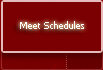
<style>
.page{position:relative;width:103px;height:70px;background:#7a0001}
.page>*{position:absolute;margin:0}
.t1{font:9px "Tahoma";color:#ffffff}
</style>
<div class="page">
<p class="t1" style="left:20px;top:21px;width:64px;height:8px">Meet Schedules</p>
</div>
